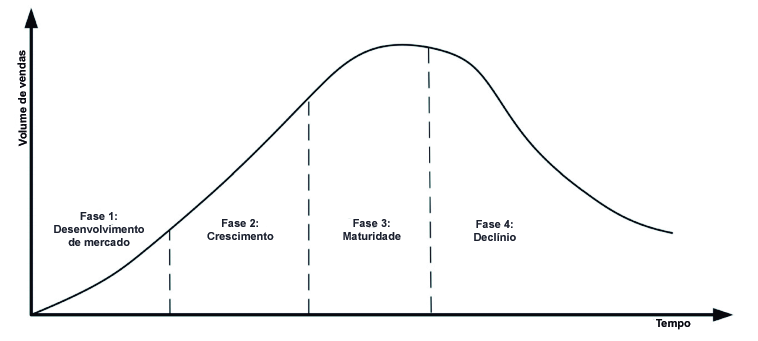
<style>
.page{position:relative;width:758px;height:341px;background:#ffffff}
.page>*{position:absolute;margin:0}
.t1{font:11px "Arial-BoldMT";color:#08090e}
.t2{font:11px "Arial-BoldMT";color:#1b202d}
</style>
<div class="page">
<p class="t1" style="left:17px;top:50px;width:10px;height:97px;rotate:-91deg">Volume de vendas</p>
<p class="t2" style="left:54px;top:212px;width:90px;height:34px;text-align:center">Fase 1:<br>Desenvolvimento<br>de mercado</p>
<p class="t2" style="left:207px;top:219px;width:67px;height:21px;text-align:center">Fase 2:<br>Crescimento</p>
<p class="t2" style="left:343px;top:219px;width:58px;height:21px;text-align:center">Fase 3:<br>Maturidade</p>
<p class="t2" style="left:474px;top:220px;width:42px;height:21px;text-align:center">Fase 4:<br>Declínio</p>
<p class="t1" style="left:656px;top:319px;width:35px;height:11px">Tempo</p>
</div>
